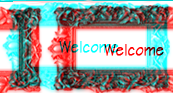
<style>
.page{position:relative;width:173px;height:93px}
.page>*{position:absolute;margin:0}
.t1{font:17px "ER-Architect1251";letter-spacing:0.005em;font-weight:bold}
</style>
<div class="page">
<p class="t1" style="left:59px;top:40px;width:60px;height:12px">Welcome</p>
</div>
